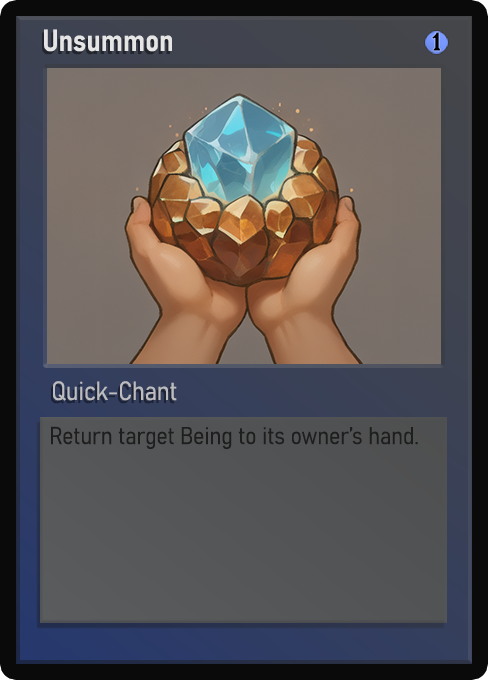
<style>
.page{position:relative;width:488px;height:680px}
.page>*{position:absolute;margin:0}
.t1{font:30px "Bahnschrift-SemiBoldSemiCondensed";color:#f2f2f2;font-weight:bold}
.t2{font:25px "WTRRoycroft";color:#000000;font-weight:bold;scale:1.09 1}
.t3{font:26px "Bahnschrift-LightSemiCondensed";color:#c8c8c8;font-weight:bold}
.t4{font:24px "Bahnschrift-LightSemiCondensed";color:#1e1e1e;font-weight:bold}
</style>
<div class="page">
<p class="t1" style="left:44px;top:29px;width:128px;height:23px;opacity:0.9">Unsummon</p>
<p class="t2" style="left:432px;top:32px;width:9px;height:19px">1</p>
<p class="t3" style="left:53px;top:381px;width:124px;height:20px;opacity:0.9">Quick-Chant</p>
<p class="t4" style="left:51px;top:426px;width:367px;height:23px">Return target Being to its owner’s hand.</p>
</div>
